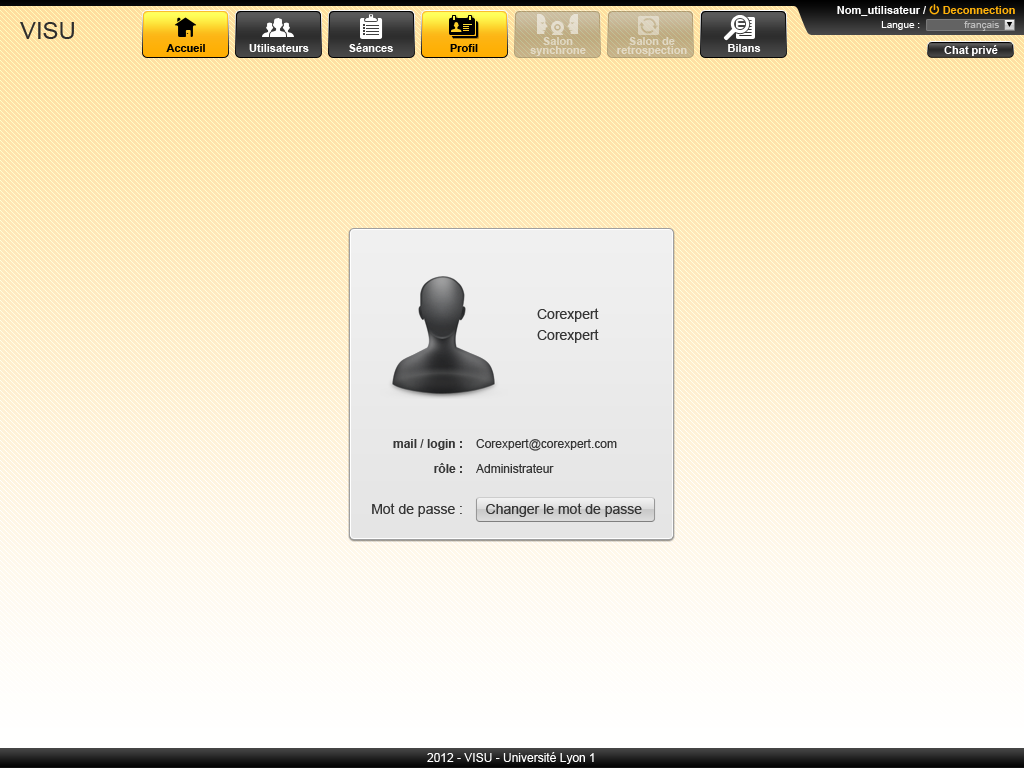
<style>
.page{position:relative;width:1024px;height:768px}
.page>*{position:absolute;margin:0}
.t1{font:11px "Arial-BoldMT";color:#ffffff}
.t2{font:11px "Arial-BoldMT";color:#feb10a}
.t3{font:24px "ArialMT";color:#2e2e2e}
.t4{font:10px "ArialMT";color:#ffffff}
.t5{font:10px "ArialMT";color:#bdbdbd}
.t6{font:11px/9px "Arial-BoldMT";color:#e3d8c2}
.t7{font:11px/9px "Arial-BoldMT";color:#e2d8c2}
.t8{font:11px "Arial-BoldMT";color:#010101}
.t9{font:11px "Arial-BoldMT";color:#000000}
.t10{font:14px "ArialMT";color:#363636}
.t11{font:12px "Arial-BoldMT";color:#363636}
.t12{font:12px "ArialMT";color:#363636}
.t13{font:12px "ArialMT";color:#fefefe}
</style>
<div class="page">
<p class="t1" style="left:837px;top:6px;width:89px;height:10px">Nom_utilisateur /</p>
<p class="t2" style="left:943px;top:6px;width:72px;height:8px">Deconnection</p>
<p class="t3" style="left:20px;top:22px;width:54px;height:17px">VISU</p>
<p class="t4" style="left:881px;top:21px;width:39px;height:9px">Langue :</p>
<p class="t5" style="left:964px;top:21px;width:35px;height:10px">français</p>
<p class="t6" style="left:530px;top:37px;width:56px;height:19px;text-align:center">Salon<br>synchrone</p>
<p class="t7" style="left:617px;top:37px;width:70px;height:19px;text-align:center">Salon de<br>retrospection</p>
<p class="t8" style="left:166px;top:44px;width:39px;height:8px">Accueil</p>
<p class="t1" style="left:249px;top:44px;width:60px;height:8px">Utilisateurs</p>
<p class="t1" style="left:349px;top:43px;width:44px;height:9px">Séances</p>
<p class="t9" style="left:450px;top:44px;width:28px;height:8px">Profil</p>
<p class="t1" style="left:728px;top:44px;width:33px;height:8px">Bilans</p>
<p class="t1" style="left:944px;top:45px;width:54px;height:11px">Chat privé</p>
<p class="t10" style="left:537px;top:308px;width:62px;height:14px">Corexpert</p>
<p class="t10" style="left:537px;top:329px;width:62px;height:14px">Corexpert</p>
<p class="t11" style="left:393px;top:439px;width:69px;height:11px">mail / login :</p>
<p class="t12" style="left:476px;top:439px;width:141px;height:12px">Corexpert@corexpert.com</p>
<p class="t11" style="left:434px;top:463px;width:28px;height:10px">rôle :</p>
<p class="t12" style="left:476px;top:464px;width:78px;height:9px">Administrateur</p>
<p class="t10" style="left:372px;top:503px;width:90px;height:14px">Mot de passe :</p>
<p class="t10" style="left:486px;top:503px;width:156px;height:14px">Changer le mot de passe</p>
<p class="t13" style="left:427px;top:752px;width:167px;height:12px">2012 - VISU - Université Lyon 1</p>
</div>
